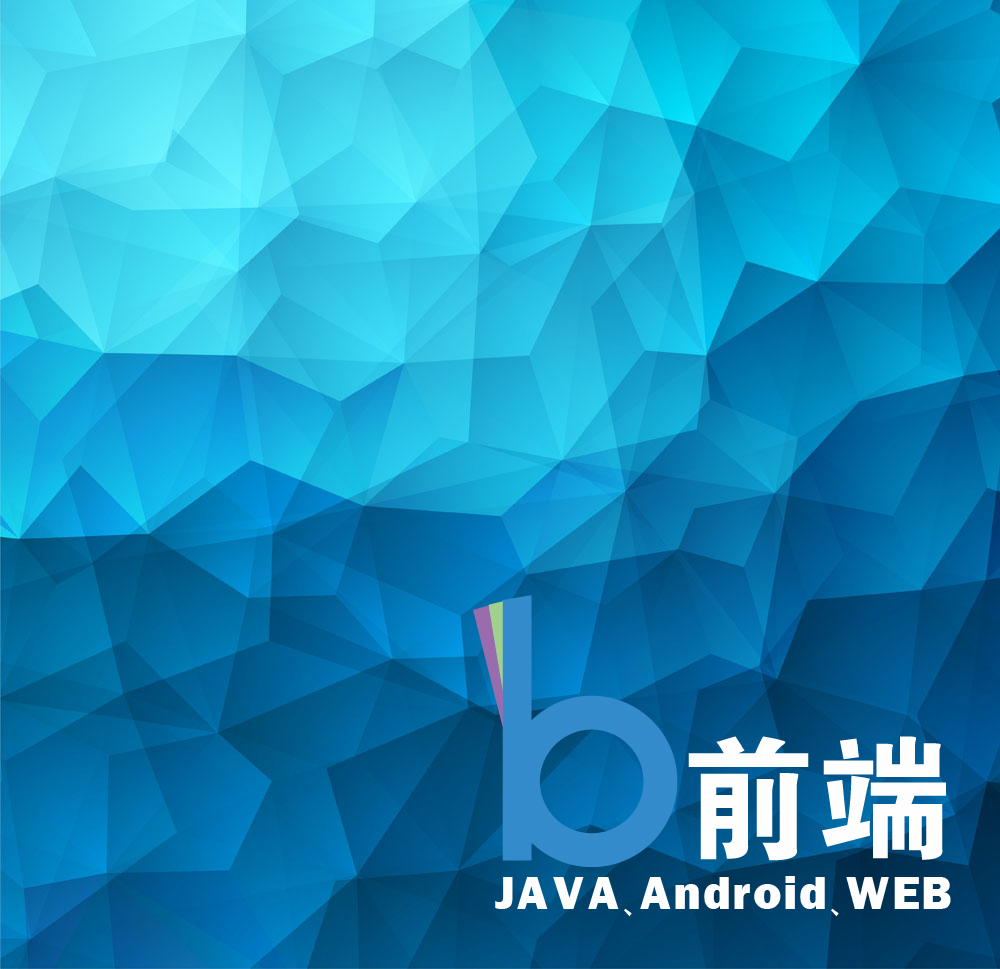
<style>
.page{position:relative;width:1000px;height:969px}
.page>*{position:absolute;margin:0}
.t1{font:133.6px "FZDHTJW--GB1-0";letter-spacing:0.1em;color:#fefefe}
.t2{font:48.2px "FranklinGothic-Heavy";letter-spacing:0.1em;color:#fefefe}
.t3{font:48.2px "HYg2gj";letter-spacing:0.1em;color:#fefefe}
</style>
<div class="page">
<p class="t1" style="left:688px;top:736px;width:258px;height:125px">前端</p>
<p class="t2" style="left:495px;top:876px;width:456px;height:41px">JAVA<span class="t3">、</span>Android<span class="t3">、</span>WEB</p>
</div>
